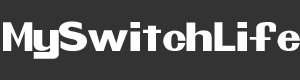
<style>
.page{position:relative;width:300px;height:80px;background:#333333}
.page>*{position:absolute;margin:0}
.t1{font:36.7px "Pretendo";color:#ffffff}
</style>
<div class="page">
<p class="t1" style="left:3px;top:21px;width:297px;height:38px">MySwitchLife</p>
</div>
